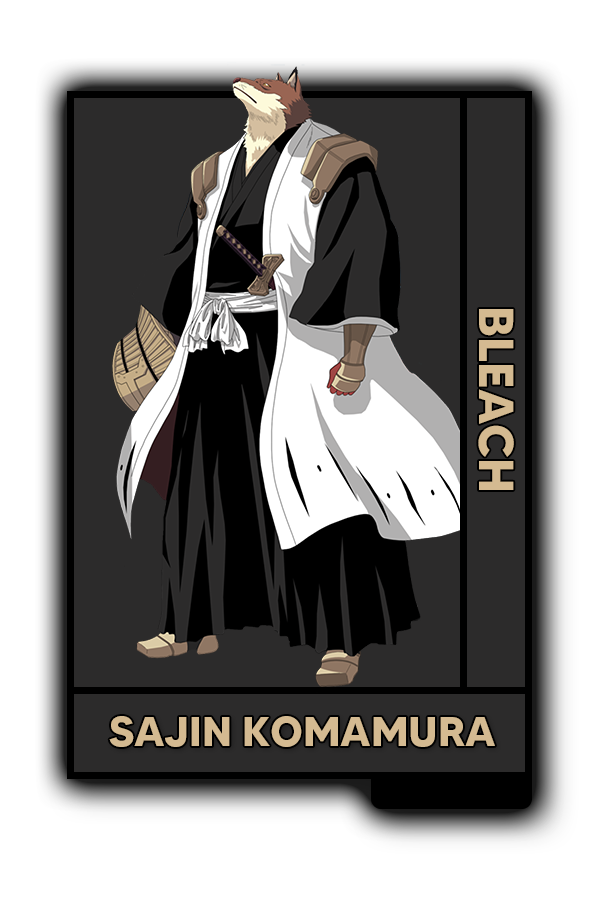
<style>
.page{position:relative;width:600px;height:900px;background:#2c2b2b}
.page>*{position:absolute;margin:0}
.t1{font:48.8px "MADETOMMY-Bold";color:#d4ba91}
.t2{font:42px "MADETOMMY-Bold";color:#d4ba91}
</style>
<div class="page">
<p class="t1" style="left:478px;top:309px;width:36px;height:181px;rotate:90deg">BLEACH</p>
<p class="t2" style="left:109px;top:716px;width:386px;height:31px">SAJIN KOMAMURA</p>
</div>
